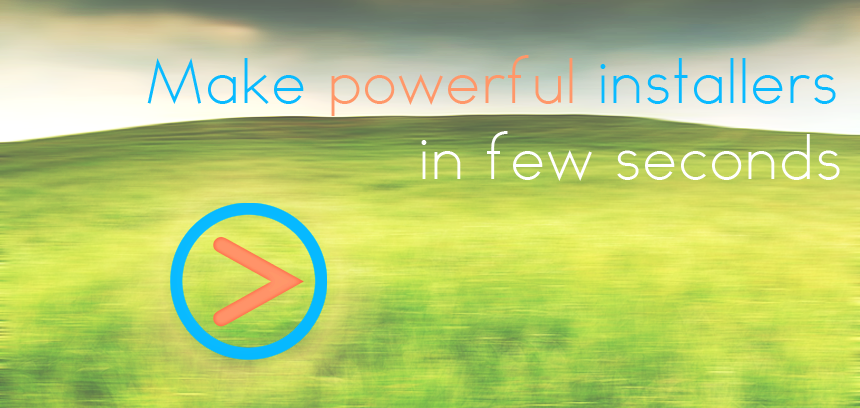
<style>
.page{position:relative;width:860px;height:408px}
.page>*{position:absolute;margin:0}
.t1{font:57px "TYPOGRAPHPRO-Light";color:#09baff}
.t2{font:57px "TYPOGRAPHPRO-Light";color:#ff9769}
.t3{font:57px "TYPOGRAPHPRO-Light";color:#ffffff}
</style>
<div class="page">
<p class="t1" style="left:147px;top:55px;width:689px;height:61px">Make <span class="t2">powerful</span> installers</p>
<p class="t3" style="left:421px;top:131px;width:419px;height:50px">in few seconds</p>
</div>
